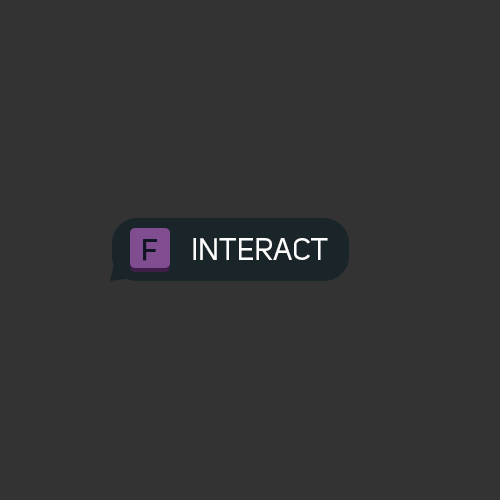
<style>
.page{position:relative;width:500px;height:500px;background:#333333}
.page>*{position:absolute;margin:0}
.t1{font:29.2px "UniSansRegular";color:#121524;font-weight:bold}
.t2{font:30.8px "UniSansRegular";color:#ffffff}
</style>
<div class="page">
<p class="t1" style="left:143px;top:239px;width:14px;height:22px">F</p>
<p class="t2" style="left:193px;top:238px;width:135px;height:22px">INTERACT</p>
</div>
